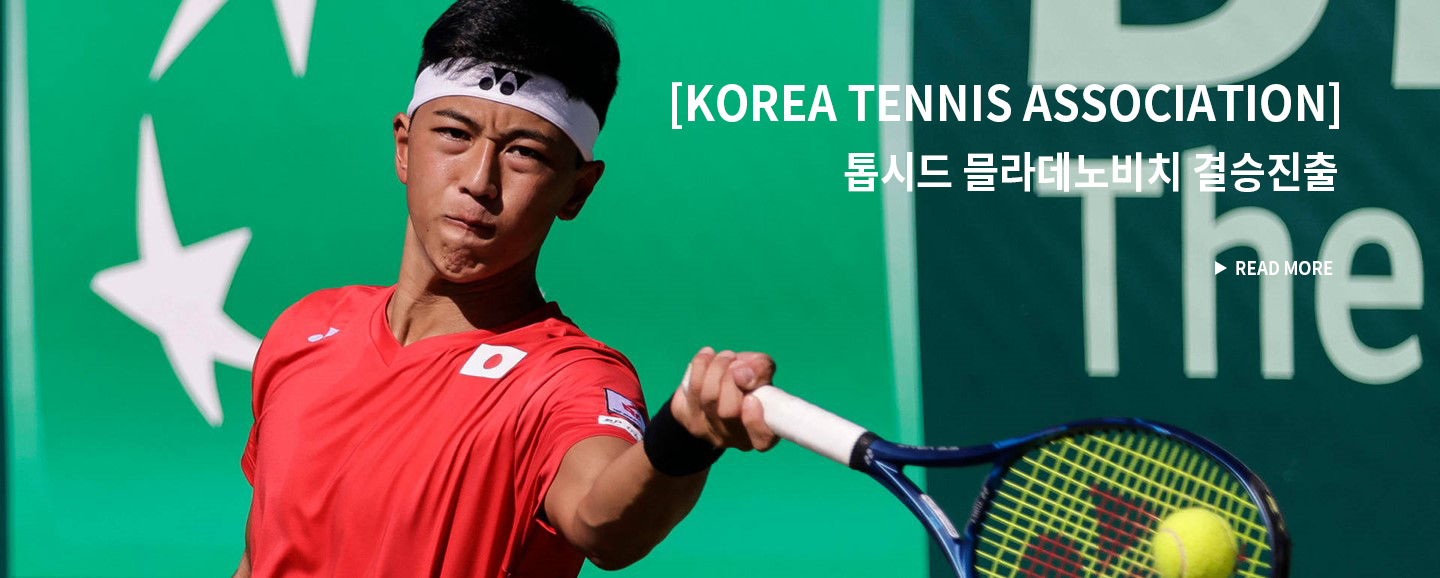
<style>
.page{position:relative;width:1440px;height:578px}
.page>*{position:absolute;margin:0}
.t1{font:48.2px "NotoSansKR-Bold";color:#ffffff;scale:0.93 1}
.t2{font:42.8px "NotoSansKR-Bold";color:#ffffff;scale:0.93 1}
.t3{font:18.2px "NotoSansKR-Bold";color:#ffffff;scale:0.93 1}
</style>
<div class="page">
<p class="t1" style="left:672px;top:82px;width:667px;height:47px">[KOREA TENNIS ASSOCIATION]</p>
<p class="t2" style="left:844px;top:152px;width:493px;height:40px">톱시드 믈라데노비치 결승진출</p>
<p class="t3" style="left:1236px;top:261px;width:97px;height:14px">READ MORE</p>
</div>
